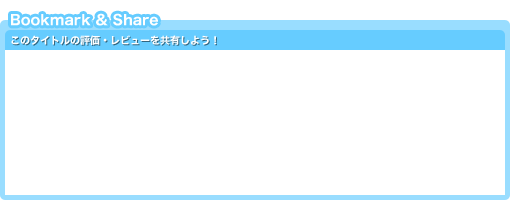
<style>
.page{position:relative;width:510px;height:200px;background:#ffffff}
.page>*{position:absolute;margin:0}
.t1{font:14px "HiraginoKaku-W7-90msp-RKSJ-H";color:#ffffff}
.t2{font:10px "HiraginoKaku-W7-90msp-RKSJ-H";color:#ffffff}
</style>
<div class="page">
<p class="t1" style="left:11px;top:13px;width:147px;height:13px">Bookmark &amp; Share</p>
<p class="t2" style="left:11px;top:35px;width:205px;height:10px">このタイトルの評価・レビューを共有しよう！</p>
</div>
